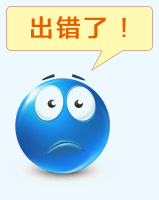
<style>
.page{position:relative;width:159px;height:200px;background:#edf8ff}
.page>*{position:absolute;margin:0}
.t1{font:24px "FZLTZHUNHK--GBK1-0";letter-spacing:0.1em;color:#e36000;font-weight:bold}
</style>
<div class="page">
<p class="t1" style="left:31px;top:16px;width:95px;height:23px">出错了 !</p>
</div>
